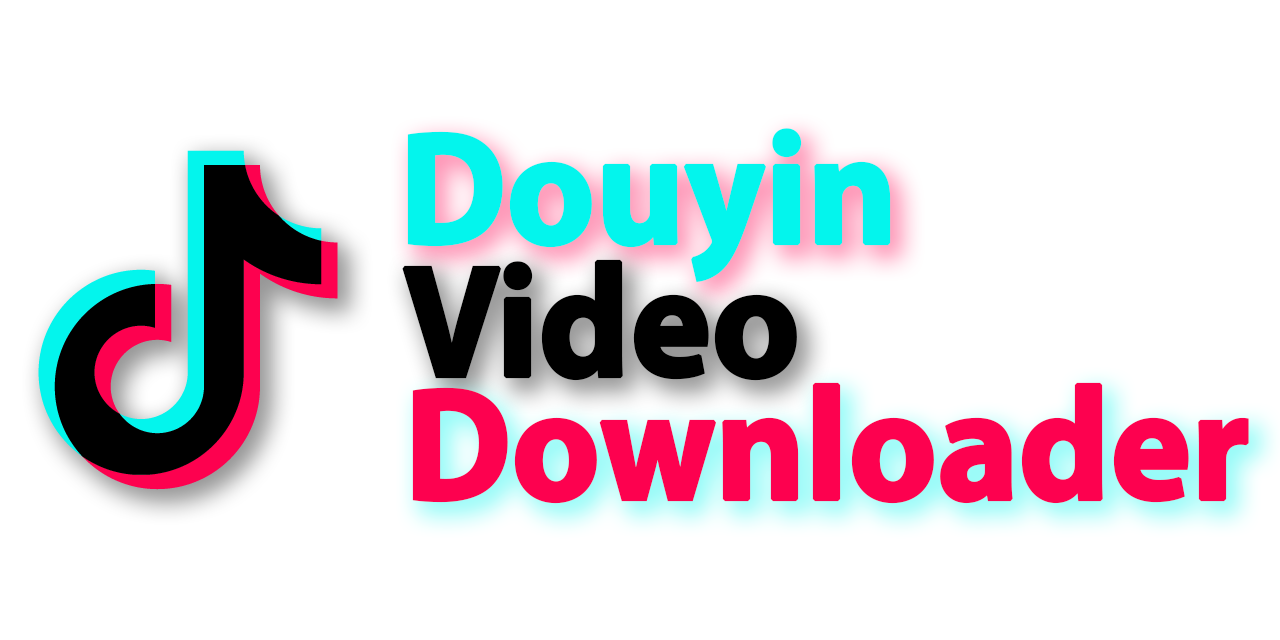
<style>
.page{position:relative;width:1280px;height:640px;background:#ffffff}
.page>*{position:absolute;margin:0}
.t1{font:160px "MyriadPro-Bold";letter-spacing:-0.02em;color:#03f5ed;font-weight:bold;scale:0.95 1}
.t2{font:160px "MyriadPro-Bold";letter-spacing:-0.02em;color:#000000;font-weight:bold;scale:0.95 1}
.t3{font:160px "MyriadPro-Bold";letter-spacing:-0.02em;color:#fd014f;font-weight:bold;scale:0.95 1}
</style>
<div class="page">
<p class="t1" style="left:407px;top:128px;width:484px;height:154px">Douyin</p>
<p class="t2" style="left:402px;top:259px;width:395px;height:122px">Video</p>
<p class="t3" style="left:412px;top:382px;width:837px;height:122px">Downloader</p>
</div>
